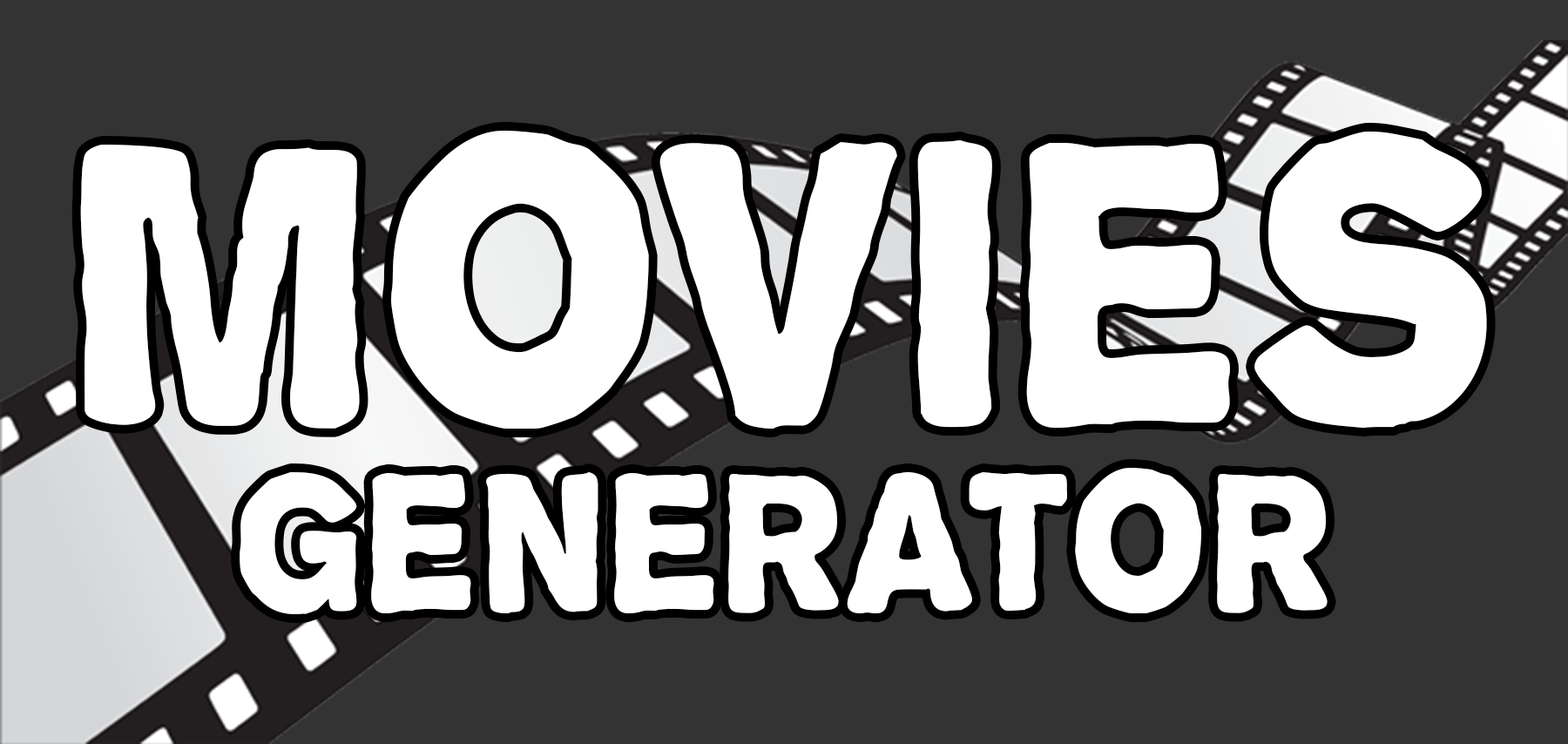
<style>
.page{position:relative;width:1568px;height:744px;background:#333333}
.page>*{position:absolute;margin:0}
.t1{font:172.3px/177.9px "Propaganda";letter-spacing:0.005em;color:#ffffff;scale:0.93 1}
.t2{font:352.7px/177.9px "Propaganda";letter-spacing:0.005em;color:#ffffff;scale:0.93 1}
</style>
<div class="page">
<p class="t1" style="left:80px;top:131px;width:1407px;height:483px;text-align:center"><span class="t2">MOVIES<br></span>Generator</p>
</div>
